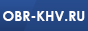
<style>
.page{position:relative;width:88px;height:31px}
.page>*{position:absolute;margin:0}
.t1{font:14px "CenturyGothic-Bold";color:#fefefe;text-transform:uppercase}
</style>
<div class="page">
<p class="t1" style="left:3px;top:11px;width:82px;height:10px">Obr-khv.ru</p>
</div>
